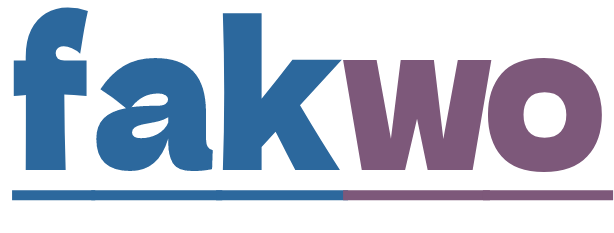
<style>
.page{position:relative;width:614px;height:233px;background:#ffffff}
.page>*{position:absolute;margin:0}
.t1{font:201.3px "DelaGothicOne-Regular";color:#2c689d;text-decoration:underline;scale:0.84 1}
.t2{font:201.3px "DelaGothicOne-Regular";color:#7d587a;text-decoration:underline;scale:0.84 1}
</style>
<div class="page">
<p class="t1" style="left:12px;top:7px;width:337px;height:194px">fak</p>
<p class="t2" style="left:343px;top:58px;width:271px;height:143px">wo</p>
</div>
